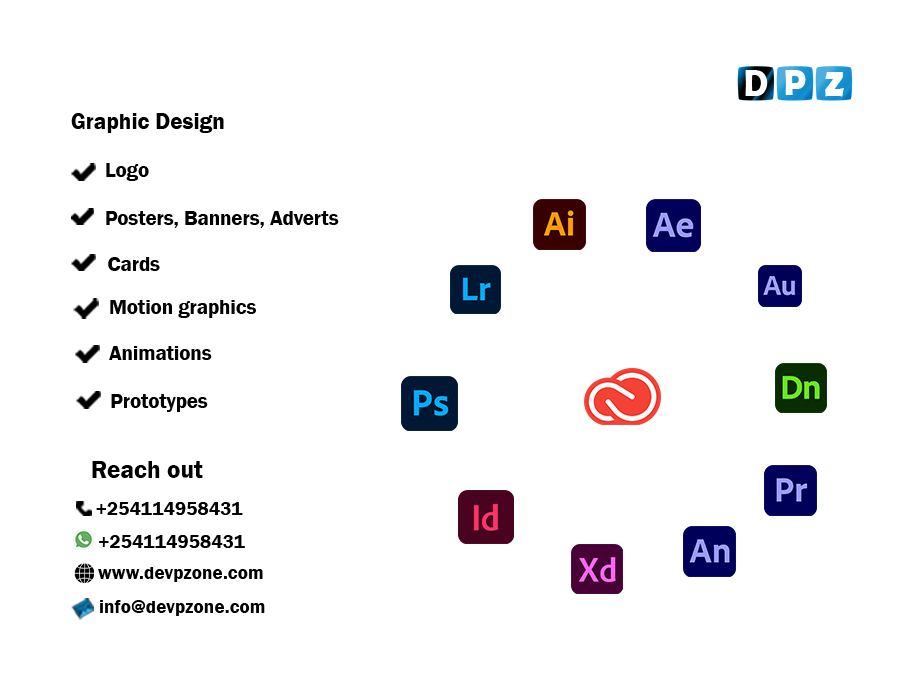
<style>
.page{position:relative;width:900px;height:700px;background:#ffffff}
.page>*{position:absolute;margin:0}
.t1{font:23.1px "FranklinGothic-Demi";color:#000000}
.t2{font:20.7px "FranklinGothic-Demi";color:#000000}
.t3{font:20.6px "FranklinGothic-Demi";color:#000000}
.t4{font:25.1px "FranklinGothic-Demi";color:#000000}
.t5{font:19.2px "FranklinGothic-Demi";color:#000000}
</style>
<div class="page">
<p class="t1" style="left:71px;top:113px;width:153px;height:20px">Graphic Design</p>
<p class="t2" style="left:106px;top:163px;width:43px;height:18px">Logo</p>
<p class="t3" style="left:106px;top:211px;width:233px;height:17px">Posters, Banners, Adverts</p>
<p class="t2" style="left:108px;top:257px;width:52px;height:14px">Cards</p>
<p class="t2" style="left:110px;top:300px;width:146px;height:18px">Motion graphics</p>
<p class="t2" style="left:109px;top:346px;width:103px;height:14px">Animations</p>
<p class="t2" style="left:111px;top:394px;width:97px;height:18px">Prototypes</p>
<p class="t4" style="left:92px;top:461px;width:111px;height:17px">Reach out</p>
<p class="t5" style="left:96px;top:502px;width:147px;height:13px">+254114958431</p>
<p class="t5" style="left:99px;top:535px;width:146px;height:13px">+254114958431</p>
<p class="t5" style="left:98px;top:567px;width:165px;height:15px">www.devpzone.com</p>
<p class="t5" style="left:100px;top:600px;width:165px;height:16px">info@devpzone.com</p>
</div>
